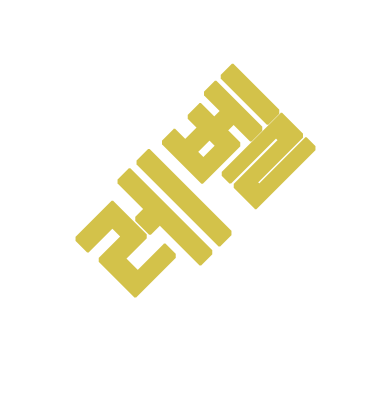
<style>
.page{position:relative;width:389px;height:404px;background:#ffffff}
.page>*{position:absolute;margin:0}
.t1{font:137.8px "BMHANNA11yrsold";letter-spacing:-0.04em;color:#d3c24a;font-weight:bold}
</style>
<div class="page">
<p class="t1" style="left:75px;top:63px;width:241px;height:235px;rotate:-45deg">레벨</p>
</div>
